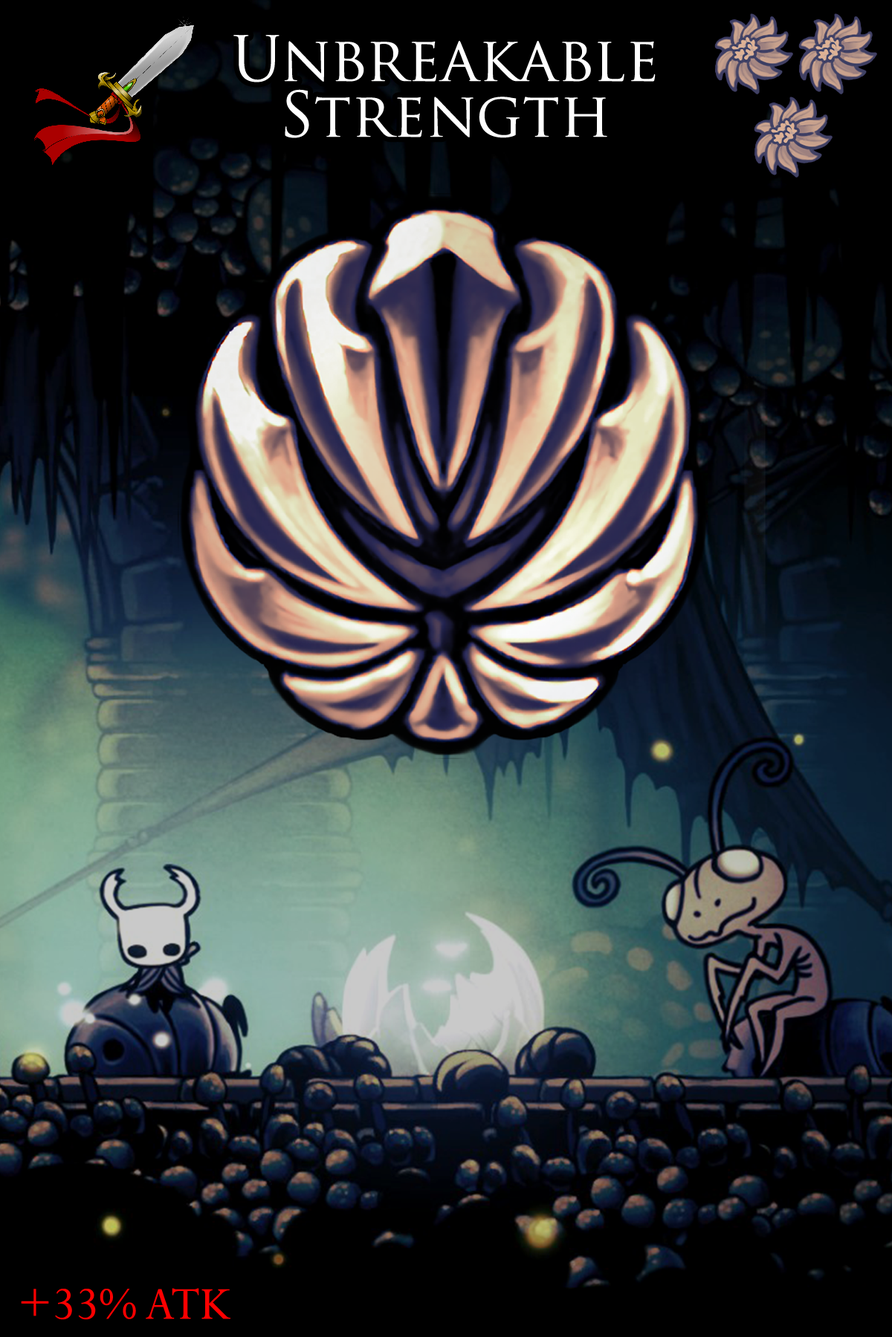
<style>
.page{position:relative;width:892px;height:1337px;background:#000000}
.page>*{position:absolute;margin:0}
.t1{font:104.8px/55.7px "TrajanPro-Regular";color:#ffffff}
.t2{font:87.7px "Perpetua";color:#ff0000}
</style>
<div class="page">
<p class="t1" style="left:233px;top:35px;width:422px;height:103px;text-align:center">Unbreakable<br>Strength</p>
<p class="t2" style="left:21px;top:1288px;width:209px;height:32px">+33% ATK</p>
</div>
